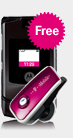
<style>
.page{position:relative;width:73px;height:138px;background:#eeeeee}
.page>*{position:absolute;margin:0}
.t1{font:14px "Tele-Grotesk-Ultr";color:#ffffff}
</style>
<div class="page">
<p class="t1" style="left:35px;top:25px;width:24px;height:11px">Free</p>
</div>
